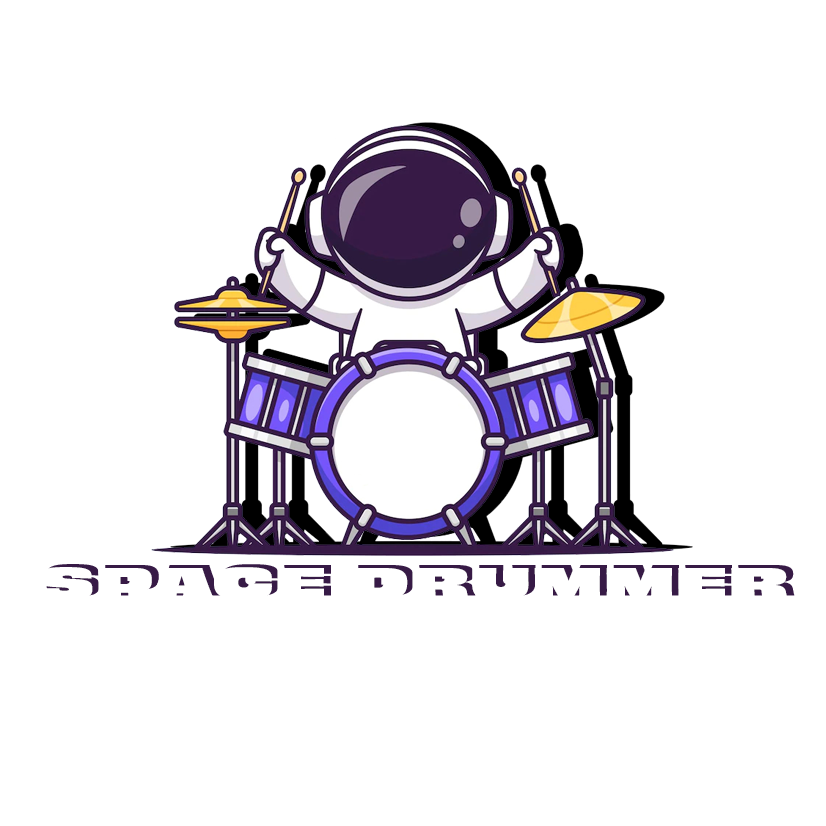
<style>
.page{position:relative;width:826px;height:826px;background:#ffffff}
.page>*{position:absolute;margin:0}
.t1{font:40px "ObviouslyDemo-ExtdBlck";letter-spacing:0.05em;color:#ffffff;text-transform:uppercase;font-weight:bold}
</style>
<div class="page">
<p class="t1" style="left:39px;top:567px;width:749px;height:33px">Space DRummer</p>
</div>
